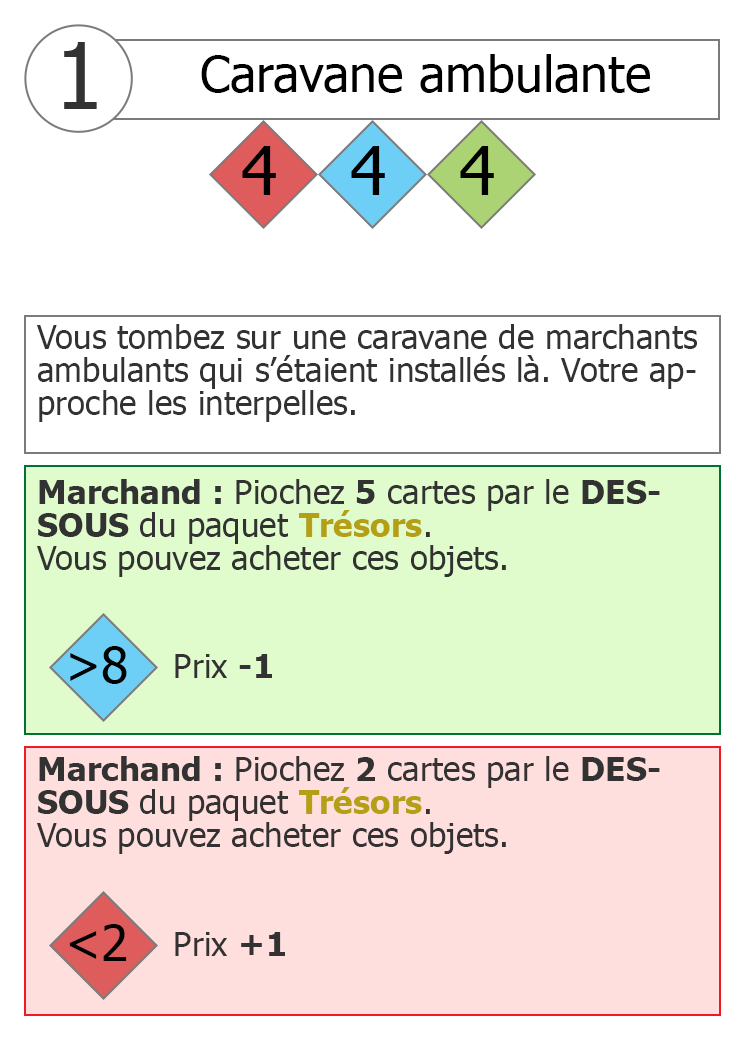
<style>
.page{position:relative;width:744px;height:1039px;background:#ffffff}
.page>*{position:absolute;margin:0}
.t1{font:92px "Tahoma";color:#323232}
.t2{font:50px "Tahoma";color:#000000}
.t3{font:66.7px "Tahoma";color:#000000}
.t4{font:33.3px/33.3px "Tahoma";color:#323232}
.t5{font:33.3px/33.3px "Tahoma-Bold";color:#323232}
.t6{font:33.3px/33.3px "Tahoma-Bold";color:#b5a015}
.t7{font:50px "Tahoma";color:#000101}
.t8{font:33.3px "Tahoma";color:#323232}
.t9{font:33.3px "Tahoma-Bold";color:#323232}
</style>
<div class="page">
<p class="t1" style="left:64px;top:42px;width:33px;height:67px">1</p>
<p class="t2" style="left:201px;top:54px;width:449px;height:39px">Caravane ambulante</p>
<p class="t3" style="left:242px;top:146px;width:34px;height:49px">4</p>
<p class="t3" style="left:351px;top:146px;width:34px;height:49px">4</p>
<p class="t3" style="left:460px;top:146px;width:34px;height:49px">4</p>
<p class="t4" style="left:37px;top:324px;width:660px;height:98px">Vous tombez sur une caravane de marchants ambulants qui s’étaient installés là. Votre approche les interpelles.</p>
<p class="t4" style="left:37px;top:479px;width:623px;height:98px"><span class="t5">Marchand :</span> Piochez <span class="t5">5</span> cartes par le <span class="t5">DESSOUS </span>du paquet <span class="t6">Trésors</span>. <br>Vous pouvez acheter ces objets.</p>
<p class="t7" style="left:70px;top:646px;width:57px;height:38px">&gt;8</p>
<p class="t8" style="left:175px;top:654px;width:97px;height:24px">Prix <span class="t9">-1</span></p>
<p class="t4" style="left:37px;top:756px;width:623px;height:98px"><span class="t5">Marchand :</span> Piochez <span class="t5">2</span> cartes par le <span class="t5">DESSOUS </span>du paquet <span class="t6">Trésors</span>. <br>Vous pouvez acheter ces objets.</p>
<p class="t7" style="left:69px;top:924px;width:58px;height:37px">&lt;2</p>
<p class="t8" style="left:175px;top:932px;width:110px;height:24px">Prix <span class="t9">+1</span></p>
</div>
